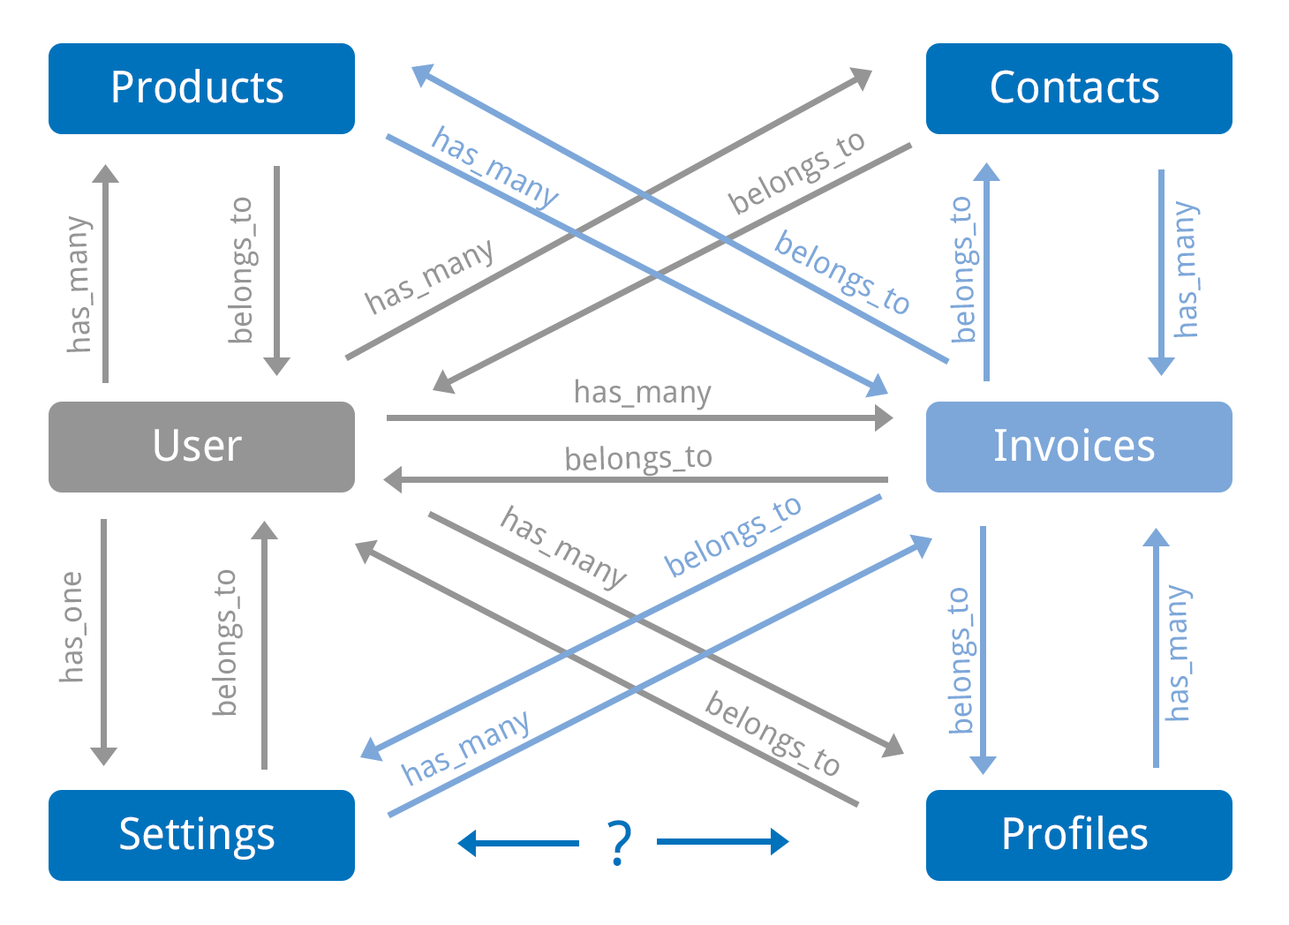
<style>
.page{position:relative;width:1289px;height:925px;background:#ffffff}
.page>*{position:absolute;margin:0}
.t1{font:44.1px "DroidSans";color:#ffffff}
.t2{font:30.9px "DroidSans";color:#7da7d9}
.t3{font:30.9px "DroidSans";color:#959595}
.t4{font:61.8px "DroidSans";color:#0072bc}
</style>
<div class="page">
<p class="t1" style="left:113px;top:69px;width:170px;height:34px">Products</p>
<p class="t1" style="left:991px;top:70px;width:168px;height:33px">Contacts</p>
<p class="t2" style="left:431px;top:124px;width:129px;height:87px;rotate:28deg">has_many</p>
<p class="t3" style="left:727px;top:133px;width:137px;height:82px;rotate:-28deg">belongs_to</p>
<p class="t3" style="left:228px;top:197px;width:31px;height:146px;rotate:-90deg">belongs_to</p>
<p class="t2" style="left:950px;top:197px;width:30px;height:146px;rotate:-92deg">belongs_to</p>
<p class="t2" style="left:1173px;top:200px;width:28px;height:137px;rotate:-92deg">has_many</p>
<p class="t3" style="left:66px;top:215px;width:28px;height:137px;rotate:-92deg">has_many</p>
<p class="t2" style="left:774px;top:229px;width:135px;height:85px;rotate:27deg">belongs_to</p>
<p class="t3" style="left:364px;top:239px;width:129px;height:76px;rotate:-26deg">has_many</p>
<p class="t3" style="left:576px;top:379px;width:136px;height:31px">has_many</p>
<p class="t1" style="left:154px;top:429px;width:88px;height:33px">User</p>
<p class="t1" style="left:995px;top:428px;width:160px;height:34px">Invoices</p>
<p class="t3" style="left:566px;top:446px;width:146px;height:31px;rotate:-2deg">belongs_to</p>
<p class="t2" style="left:663px;top:498px;width:138px;height:80px;rotate:-28deg">belongs_to</p>
<p class="t3" style="left:500px;top:505px;width:128px;height:86px;rotate:28deg">has_many</p>
<p class="t3" style="left:212px;top:569px;width:31px;height:147px;rotate:-90deg">belongs_to</p>
<p class="t3" style="left:58px;top:572px;width:29px;height:110px;rotate:-91deg">has_one</p>
<p class="t2" style="left:947px;top:588px;width:30px;height:146px;rotate:-92deg">belongs_to</p>
<p class="t2" style="left:1164px;top:584px;width:30px;height:137px;rotate:-91deg">has_many</p>
<p class="t3" style="left:704px;top:689px;width:136px;height:87px;rotate:27deg">belongs_to</p>
<p class="t2" style="left:401px;top:711px;width:128px;height:76px;rotate:-26deg">has_many</p>
<p class="t1" style="left:120px;top:817px;width:155px;height:43px">Settings</p>
<p class="t4" style="left:607px;top:820px;width:24px;height:46px">?</p>
<p class="t1" style="left:1004px;top:815px;width:144px;height:35px">Profiles</p>
</div>
